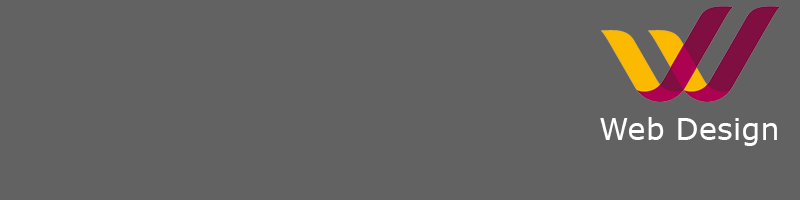
<style>
.page{position:relative;width:800px;height:200px;background:#626262}
.page>*{position:absolute;margin:0}
.t1{font:12px "MSReferenceSansSerif";color:#ffffff}
</style>
<div class="page">
<p class="t1" style="left:600px;top:117px;width:177px;height:29px">Web Design</p>
</div>
